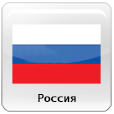
<style>
.page{position:relative;width:114px;height:114px;background:#ffffff}
.page>*{position:absolute;margin:0}
.t1{font:10.8px "LucidaSans-TypewriterBold";color:#000000}
</style>
<div class="page">
<p class="t1" style="left:38px;top:94px;width:38px;height:8px">Россия</p>
</div>
